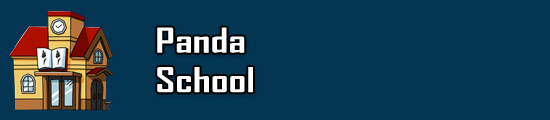
<style>
.page{position:relative;width:550px;height:120px;background:#043654}
.page>*{position:absolute;margin:0}
.t1{font:32.9px "AgencyFB-Bold";color:#ffffff;scale:1.33 1}
</style>
<div class="page">
<p class="t1" style="left:157px;top:27px;width:96px;height:66px">Panda <br>School</p>
</div>
